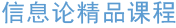
<style>
.page{position:relative;width:176px;height:28px;background:#ffffff}
.page>*{position:absolute;margin:0}
.t1{font:24px "SimHei";letter-spacing:0.05em;color:#5b9bd1}
</style>
<div class="page">
<p class="t1" style="left:2px;top:1px;width:174px;height:23px">信息论精品课程</p>
</div>
